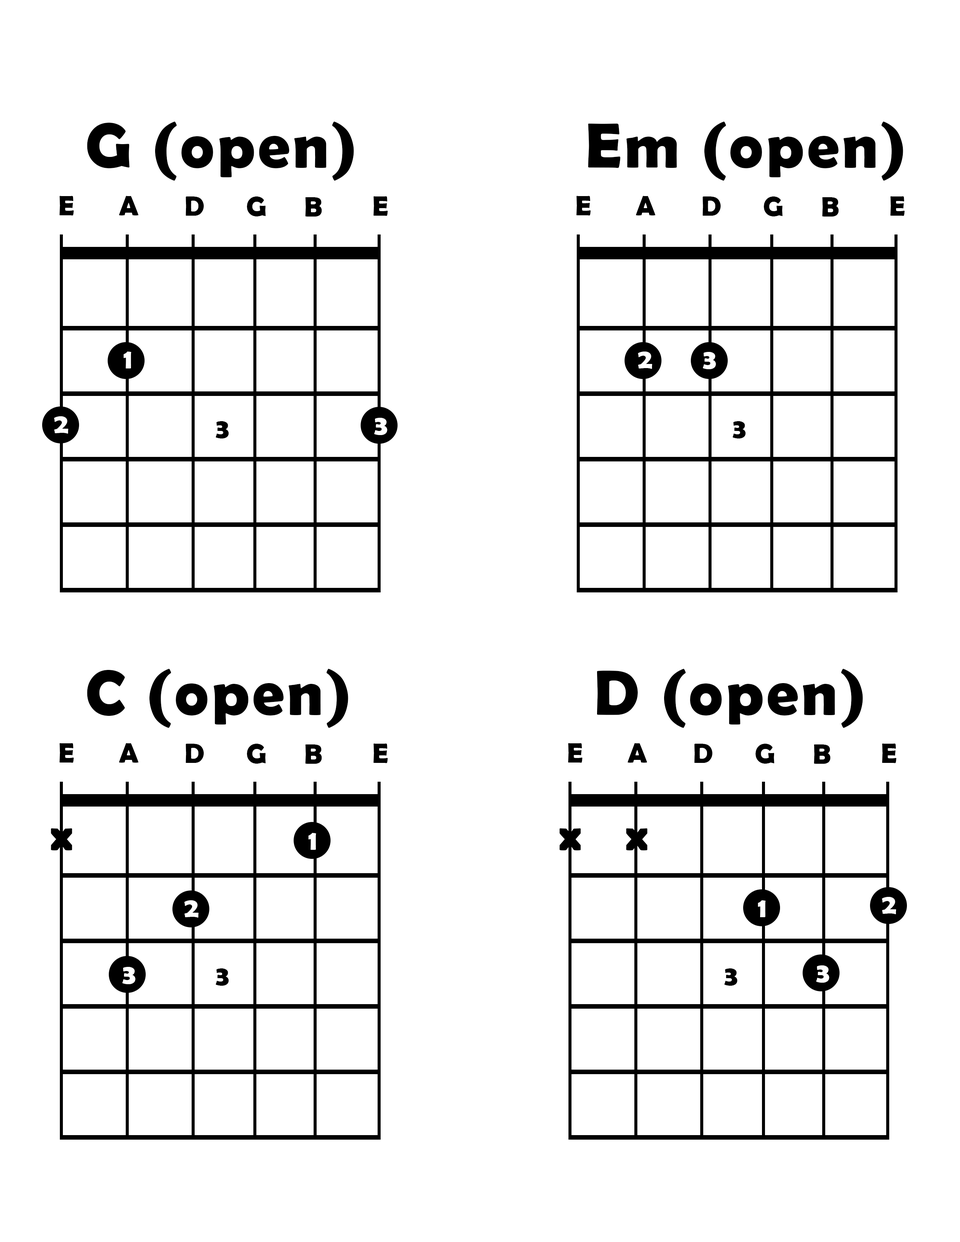
<style>
.page{position:relative;width:960px;height:1242px;background:#ffffff}
.page>*{position:absolute;margin:0}
.t1{font:64.1px "BerlinSansFBDemi-Bold";letter-spacing:0.04em;color:#000000}
.t2{font:28.2px "BerlinSansFBDemi-Bold";letter-spacing:0.04em;color:#000000}
.t3{font:28.2px "BerlinSansFBDemi-Bold";letter-spacing:0.04em;color:#ffffff}
.t4{font:46.5px "BerlinSansFBDemi-Bold";letter-spacing:0.04em;color:#000000}
</style>
<div class="page">
<p class="t1" style="left:87px;top:122px;width:267px;height:59px">G (open)</p>
<p class="t1" style="left:588px;top:122px;width:315px;height:59px">Em (open)</p>
<p class="t2" style="left:59px;top:196px;width:15px;height:20px">E</p>
<p class="t2" style="left:119px;top:196px;width:20px;height:20px">A</p>
<p class="t2" style="left:186px;top:196px;width:18px;height:20px">D</p>
<p class="t2" style="left:247px;top:196px;width:19px;height:20px">G</p>
<p class="t2" style="left:305px;top:197px;width:17px;height:20px">B</p>
<p class="t2" style="left:373px;top:196px;width:15px;height:20px">E</p>
<p class="t2" style="left:576px;top:196px;width:15px;height:20px">E</p>
<p class="t2" style="left:636px;top:196px;width:19px;height:20px">A</p>
<p class="t2" style="left:702px;top:196px;width:19px;height:20px">D</p>
<p class="t2" style="left:764px;top:196px;width:19px;height:20px">G</p>
<p class="t2" style="left:822px;top:197px;width:17px;height:20px">B</p>
<p class="t2" style="left:890px;top:196px;width:15px;height:20px">E</p>
<p class="t3" style="left:123px;top:352px;width:8px;height:17px">1</p>
<p class="t3" style="left:638px;top:352px;width:14px;height:17px">2</p>
<p class="t3" style="left:703px;top:352px;width:13px;height:17px">3</p>
<p class="t3" style="left:54px;top:416px;width:15px;height:18px">2</p>
<p class="t2" style="left:216px;top:421px;width:13px;height:18px">3</p>
<p class="t3" style="left:374px;top:418px;width:13px;height:17px">3</p>
<p class="t2" style="left:733px;top:421px;width:13px;height:18px">3</p>
<p class="t1" style="left:87px;top:669px;width:261px;height:59px">C (open)</p>
<p class="t1" style="left:597px;top:669px;width:266px;height:59px">D (open)</p>
<p class="t2" style="left:59px;top:743px;width:15px;height:20px">E</p>
<p class="t2" style="left:119px;top:743px;width:20px;height:20px">A</p>
<p class="t2" style="left:186px;top:744px;width:18px;height:19px">D</p>
<p class="t2" style="left:247px;top:744px;width:19px;height:20px">G</p>
<p class="t2" style="left:305px;top:745px;width:17px;height:19px">B</p>
<p class="t2" style="left:373px;top:743px;width:15px;height:20px">E</p>
<p class="t2" style="left:568px;top:743px;width:14px;height:20px">E</p>
<p class="t2" style="left:628px;top:743px;width:19px;height:20px">A</p>
<p class="t2" style="left:694px;top:744px;width:19px;height:19px">D</p>
<p class="t2" style="left:756px;top:744px;width:18px;height:20px">G</p>
<p class="t2" style="left:814px;top:745px;width:16px;height:19px">B</p>
<p class="t2" style="left:882px;top:743px;width:14px;height:20px">E</p>
<p class="t4" style="left:51px;top:829px;width:21px;height:22px">x</p>
<p class="t3" style="left:308px;top:833px;width:8px;height:17px">1</p>
<p class="t4" style="left:559px;top:829px;width:22px;height:22px">x</p>
<p class="t4" style="left:626px;top:829px;width:21px;height:22px">x</p>
<p class="t3" style="left:184px;top:900px;width:15px;height:18px">2</p>
<p class="t3" style="left:758px;top:900px;width:8px;height:17px">1</p>
<p class="t3" style="left:882px;top:897px;width:14px;height:17px">2</p>
<p class="t3" style="left:816px;top:966px;width:13px;height:17px">3</p>
<p class="t3" style="left:122px;top:967px;width:14px;height:17px">3</p>
<p class="t2" style="left:216px;top:969px;width:13px;height:17px">3</p>
<p class="t2" style="left:724px;top:969px;width:13px;height:17px">3</p>
</div>
